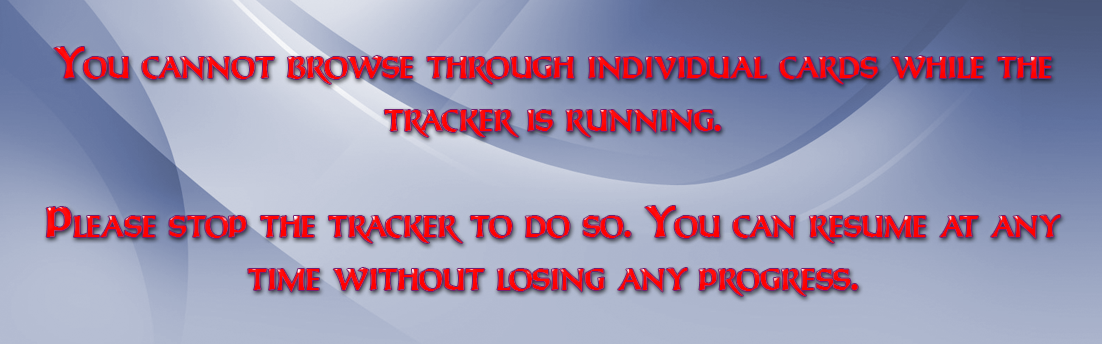
<style>
.page{position:relative;width:1102px;height:344px}
.page>*{position:absolute;margin:0}
.t1{font:44px "LHFUncialCaps";color:#ff0000;font-variant:small-caps}
</style>
<div class="page">
<p class="t1" style="left:46px;top:47px;width:1015px;height:249px;text-align:center">You cannot browse through individual cards while the <br>tracker is running.<br><br>Please stop the tracker to do so. You can resume at any time without losing any progress.</p>
<p class="t1" style="left:46px;top:47px;width:1015px;height:249px;text-align:center">You cannot browse through individual cards while the <br>tracker is running.<br><br>Please stop the tracker to do so. You can resume at any time without losing any progress.</p>
</div>
